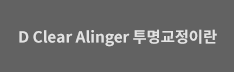
<style>
.page{position:relative;width:234px;height:78px;background:#626262}
.page>*{position:absolute;margin:0}
.t1{font:15.4px "NotoSansCJKkr-Bold";color:#e2e2e2}
</style>
<div class="page">
<p class="t1" style="left:19px;top:29px;width:198px;height:18px">D Clear Alinger 투명교정이란</p>
</div>
